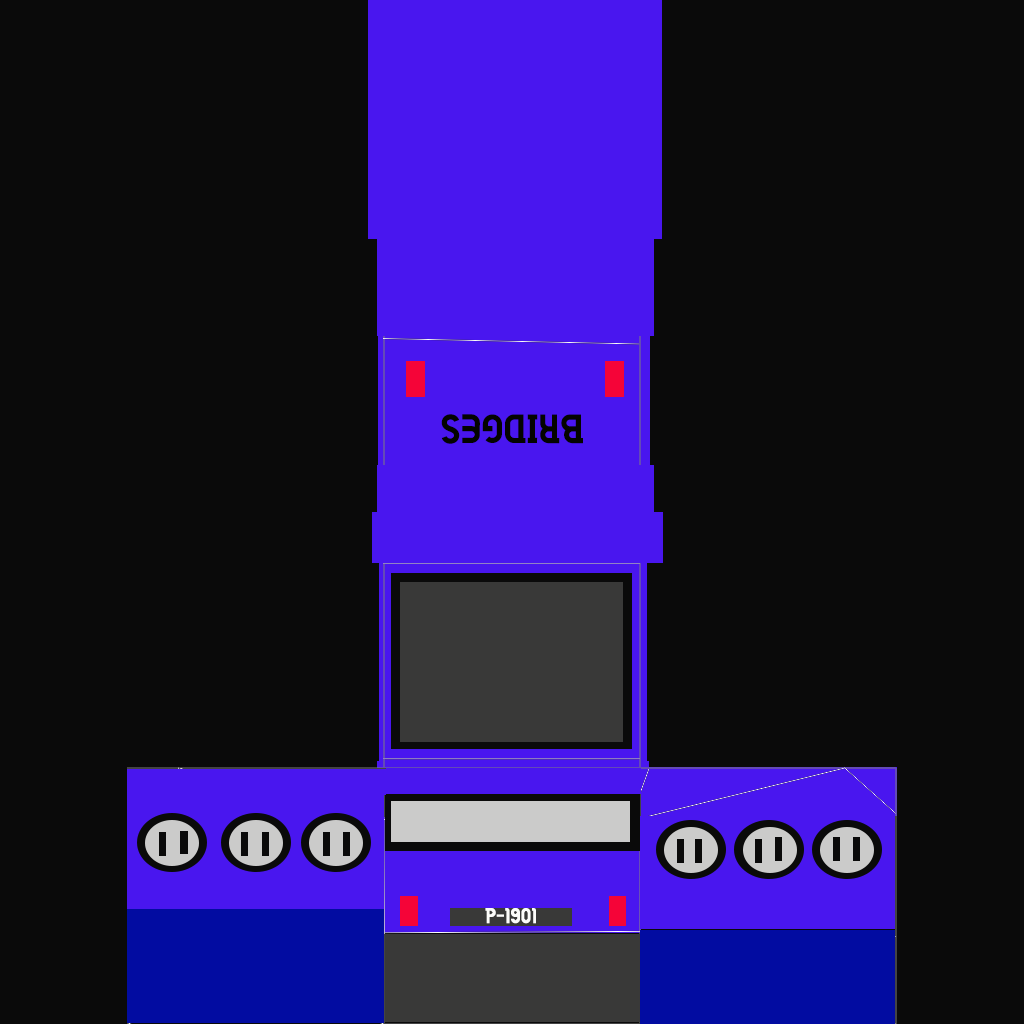
<style>
.page{position:relative;width:1024px;height:1024px;background:#0a0a0a}
.page>*{position:absolute;margin:0}
.t1{font:40.6px "GilbertBold";color:#040400}
.t2{font:21.5px "GilbertBold";color:#fdfdfb}
</style>
<div class="page">
<p class="t1" style="left:441px;top:414px;width:142px;height:30px;rotate:-180deg">BRIDGES</p>
<p class="t2" style="left:485px;top:908px;width:51px;height:16px">P-1901</p>
</div>
